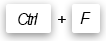
<style>
.page{position:relative;width:106px;height:41px;background:#ffffff}
.page>*{position:absolute;margin:0}
.t1{font:15.7px "Arial-ItalicMT";letter-spacing:-0.08em;color:#000000}
</style>
<div class="page">
<p class="t1" style="left:18px;top:13px;width:20px;height:12px">Ctrl</p>
<p class="t1" style="left:58px;top:16px;width:8px;height:7px">+</p>
<p class="t1" style="left:80px;top:12px;width:11px;height:12px">F</p>
</div>
